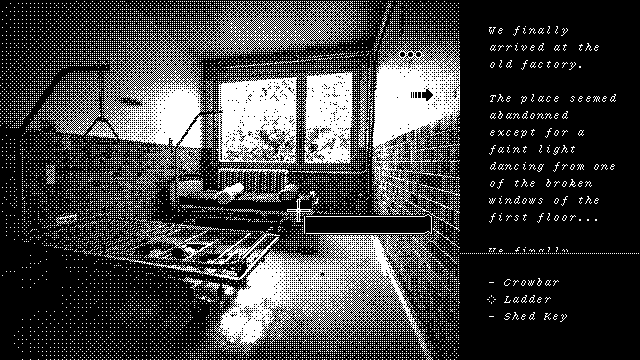
<style>
.page{position:relative;width:640px;height:360px;background:#000000}
.page>*{position:absolute;margin:0}
.t1{font:16px/17px "7:12-Serif-Italic";color:#ffffff}
</style>
<div class="page">
<p class="t1" style="left:489px;top:26px;width:127px;height:265px">We finally arrived at the old factory.<br><br>The place seemed abandonned except for a faint light dancing from one of the broken windows of the first floor...<br><br>We finally arrived at the old factory.</p>
<p class="t1" style="left:489px;top:278px;width:78px;height:44px">- Crowbar<br>- Ladder<br>- Shed Key</p>
</div>
